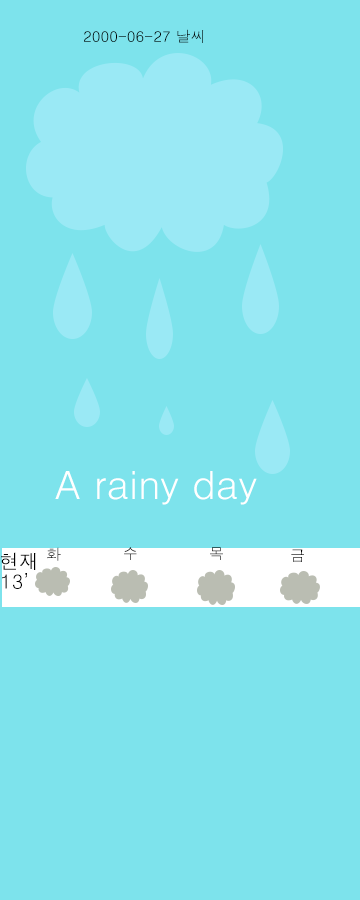
<style>
.page{position:relative;width:360px;height:900px;background:#7de3ec}
.page>*{position:absolute;margin:0}
.t1{font:15px "Dotum";color:#000000}
.t2{font:39px "Dotum";color:#ffffff}
.t3{font:20px "Dotum";color:#000000}
.t4{font:15px "Dotum"}
</style>
<div class="page">
<p class="t1" style="left:84px;top:29px;width:120px;height:14px">2000-06-27 날씨</p>
<p class="t2" style="left:55px;top:471px;width:202px;height:34px">A rainy day</p>
<p class="t3" style="left:1px;top:552px;width:35px;height:18px">현재</p>
<p class="t4" style="left:47px;top:547px;width:14px;height:14px">화</p>
<p class="t4" style="left:124px;top:547px;width:13px;height:13px">수</p>
<p class="t4" style="left:210px;top:547px;width:13px;height:13px">목</p>
<p class="t1" style="left:291px;top:549px;width:13px;height:13px">금</p>
<p class="t3" style="left:2px;top:573px;width:25px;height:16px">13’</p>
</div>
